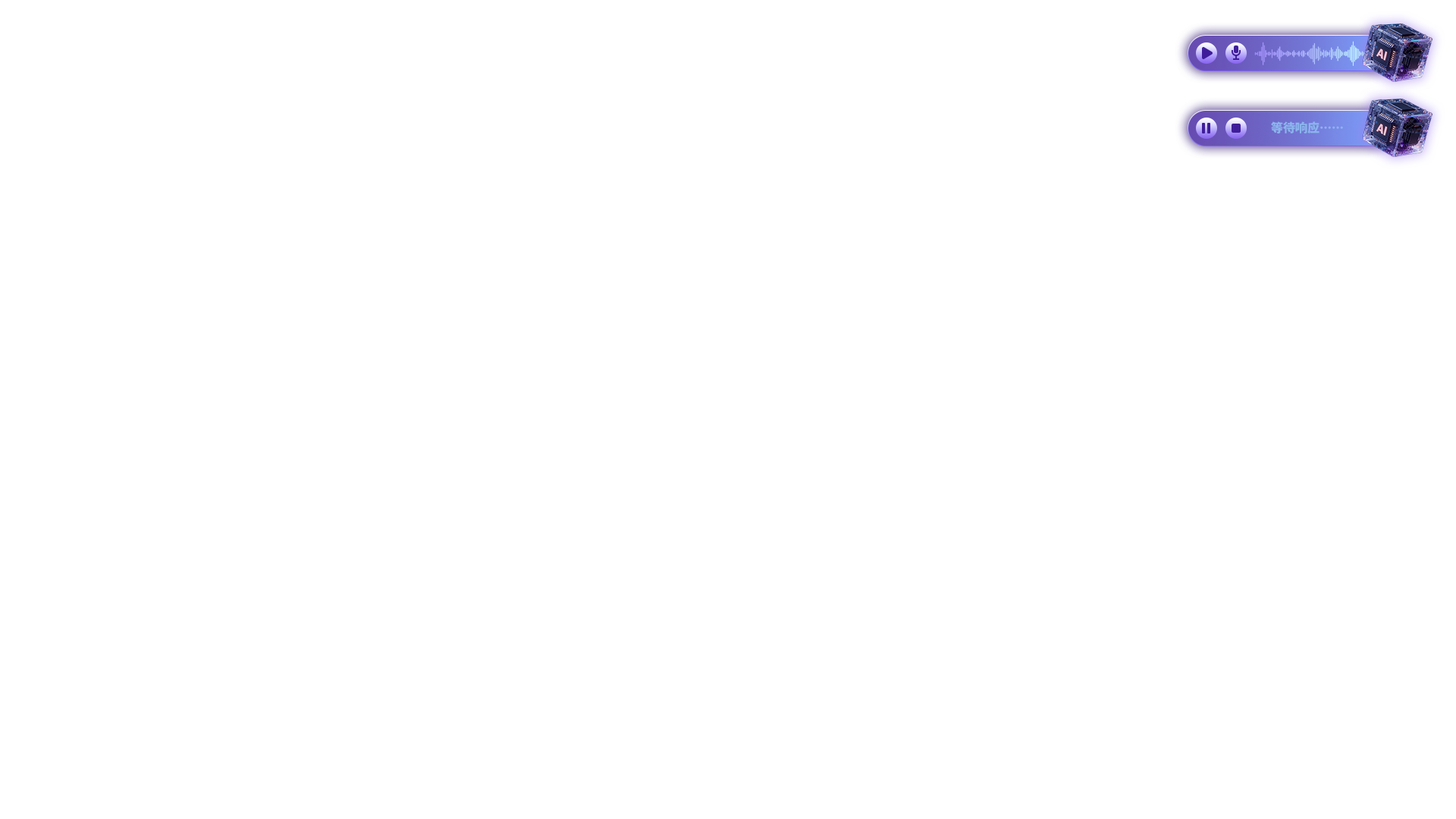
<style>
.page{position:relative;width:1456px;height:819px;background:#ffffff}
.page>*{position:absolute;margin:0}
.t1{font:12.1px "SourceHanSansSC-Heavy";color:#8bb5ee}
</style>
<div class="page">
<p class="t1" style="left:1271px;top:121px;width:72px;height:12px">等待响应……</p>
</div>
